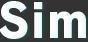
<style>
.page{position:relative;width:88px;height:42px;background:#333333}
.page>*{position:absolute;margin:0}
.t1{font:46.7px "RodinPro-EB";letter-spacing:0.018em;color:#feffff}
</style>
<div class="page">
<p class="t1" style="left:0px;top:1px;width:86px;height:38px">Sim</p>
</div>
